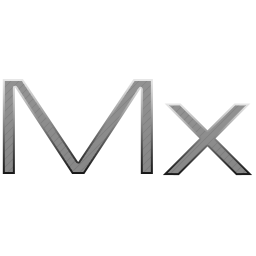
<style>
.page{position:relative;width:256px;height:256px;background:#ffffff}
.page>*{position:absolute;margin:0}
.t1{font:127.4px "Michroma";color:#8b8b8b}
</style>
<div class="page">
<p class="t1" style="left:2px;top:79px;width:151px;height:95px">M</p>
<p class="t1" style="left:162px;top:103px;width:91px;height:73px">x</p>
</div>
